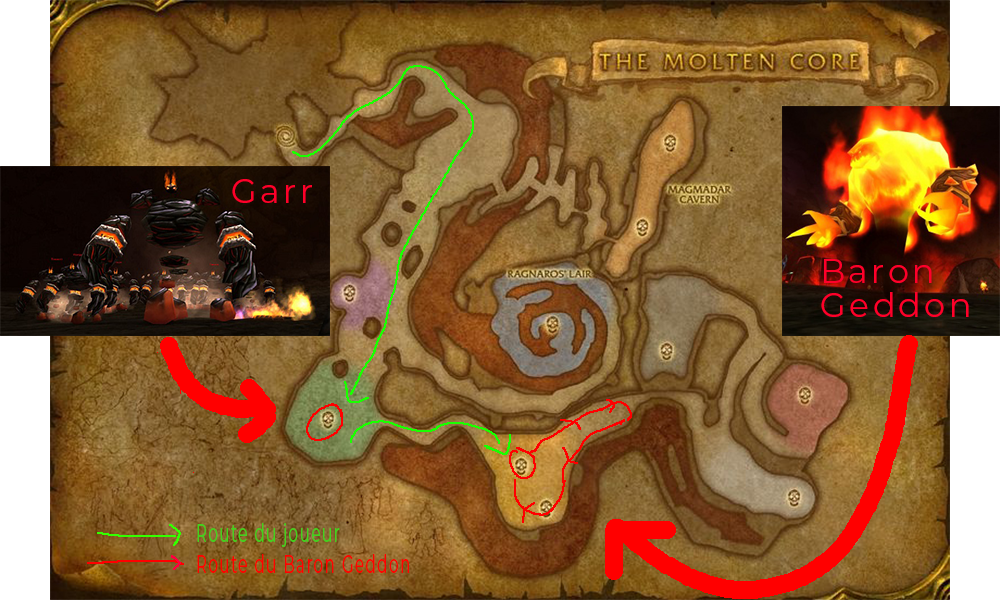
<style>
.page{position:relative;width:1000px;height:600px}
.page>*{position:absolute;margin:0}
.t1{font:33.3px "Montserrat-Regular";letter-spacing:0.1em;color:#ff002a}
.t2{font:33.3px/33.3px "Montserrat-Regular";letter-spacing:0.1em;color:#ff002a}
.t3{font:25px/30.6px "Montserrat-Regular";letter-spacing:0.1em;color:#ff0000;scale:0.6 1}
.t4{font:25px/30.6px "Montserrat-Regular";letter-spacing:0.1em;color:#42d21e;scale:0.6 1}
</style>
<div class="page">
<p class="t1" style="left:232px;top:179px;width:80px;height:24px">Garr</p>
<p class="t2" style="left:821px;top:259px;width:148px;height:58px">Baron Geddon</p>
<p class="t3" style="left:197px;top:523px;width:212px;height:50px"><span class="t4">Route du joueur <br></span>Route du Baron Geddon</p>
</div>
